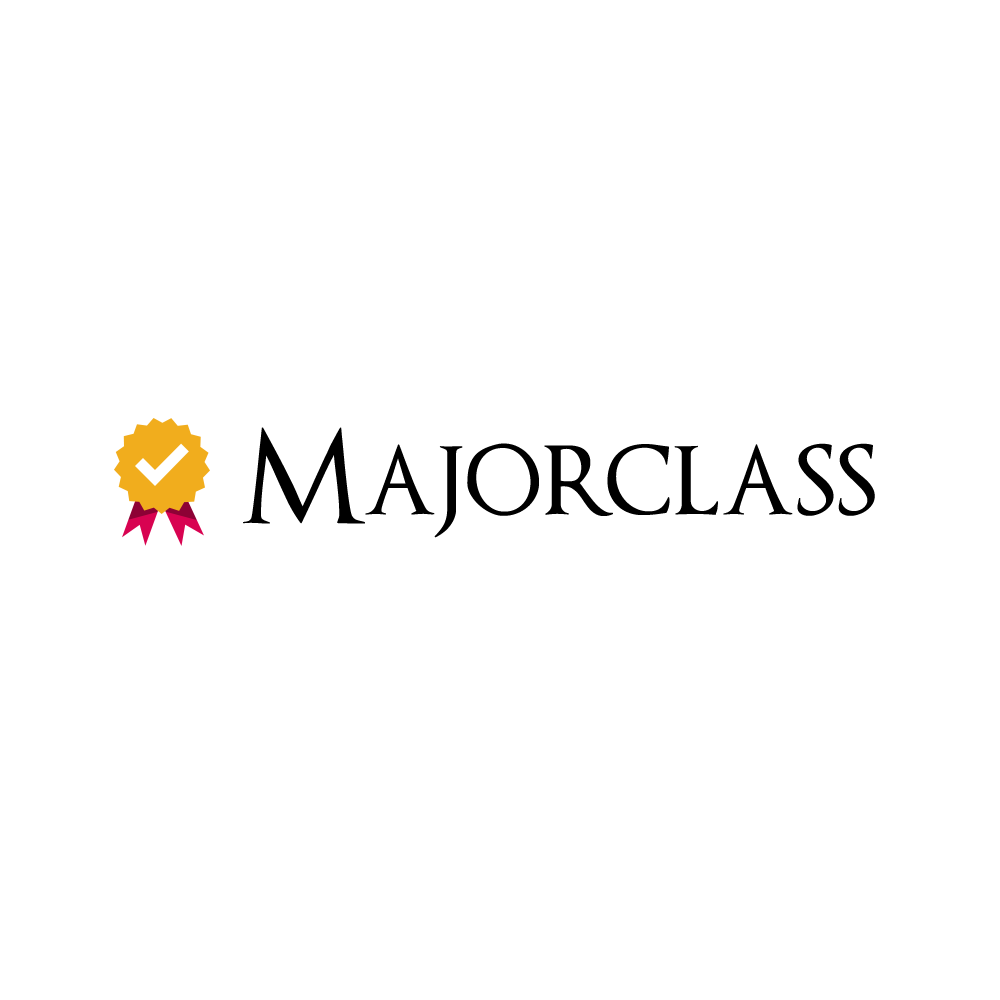
<style>
.page{position:relative;width:1000px;height:1000px;background:#ffffff}
.page>*{position:absolute;margin:0}
.t1{font:125px "OptimusPrinceps";color:#000000}
</style>
<div class="page">
<p class="t1" style="left:243px;top:427px;width:632px;height:111px">Majorclass</p>
</div>
